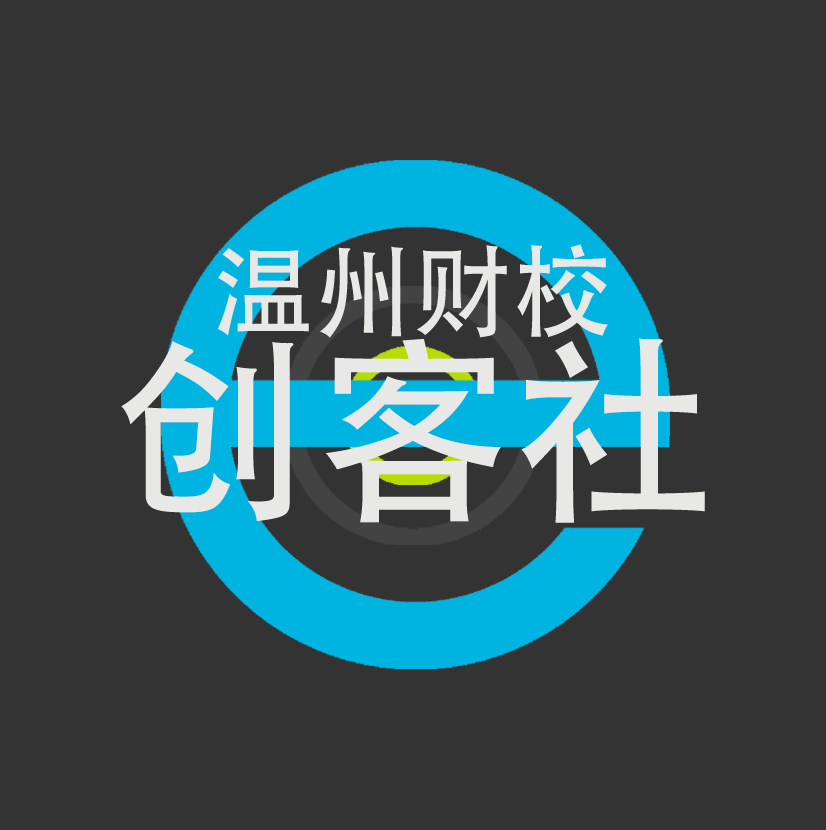
<style>
.page{position:relative;width:826px;height:830px;background:#333333}
.page>*{position:absolute;margin:0}
.t1{font:100px "AdobeHeitiStd-Regular";color:#e8e8e6}
.t2{font:200px "AdobeHeitiStd-Regular";color:#e8e8e6}
</style>
<div class="page">
<p class="t1" style="left:218px;top:244px;width:390px;height:94px">温州财校</p>
<p class="t2" style="left:121px;top:338px;width:584px;height:185px">创客社</p>
</div>
